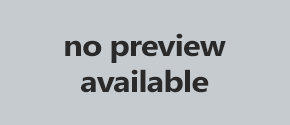
<style>
.page{position:relative;width:290px;height:125px;background:#c6cbcf}
.page>*{position:absolute;margin:0}
.t1{font:30px "SegoeUI-Bold";letter-spacing:-0.03em;color:#2a2a2a;scale:1.1 1}
</style>
<div class="page">
<p class="t1" style="left:65px;top:33px;width:161px;height:60px;text-align:center">no preview<br>available</p>
</div>
